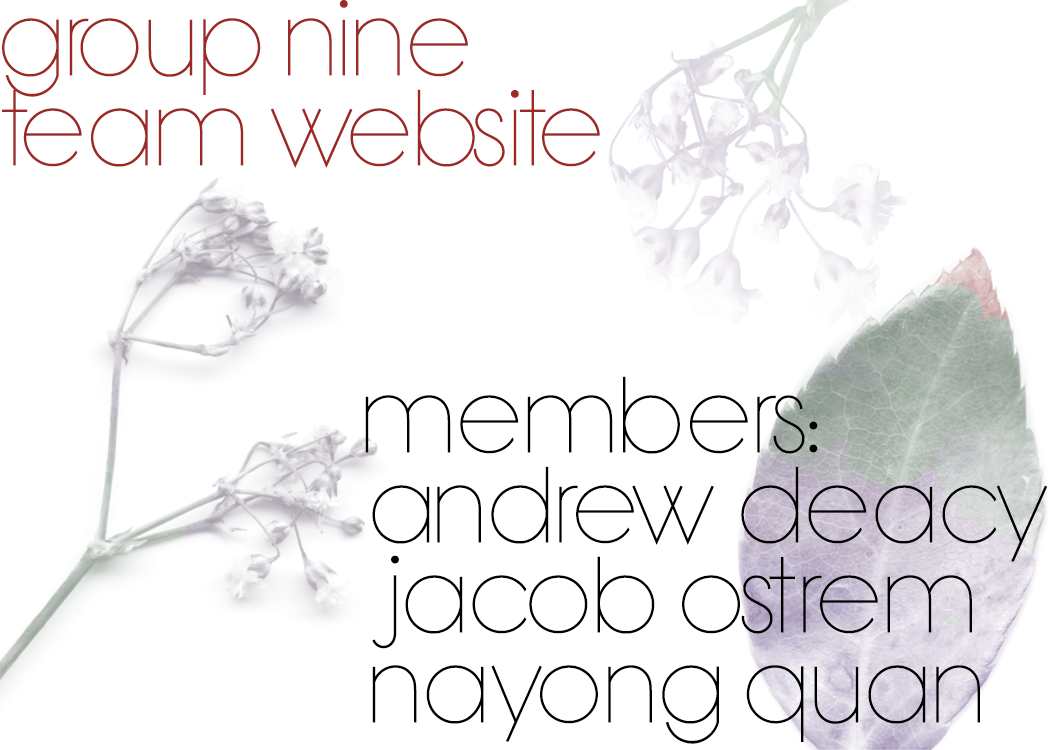
<style>
.page{position:relative;width:1050px;height:750px;background:#ffffff}
.page>*{position:absolute;margin:0}
.t1{font:75px "BondoluoPeek";color:#9d2926}
.t2{font:75px "BondoluoPeek";color:#000000}
</style>
<div class="page">
<p class="t1" style="left:2px;top:0px;width:598px;height:168px">group nine team website</p>
<p class="t2" style="left:365px;top:376px;width:683px;height:368px">members:<br>Andrew deacy<br>jacob ostrem<br>nayong quan</p>
</div>
